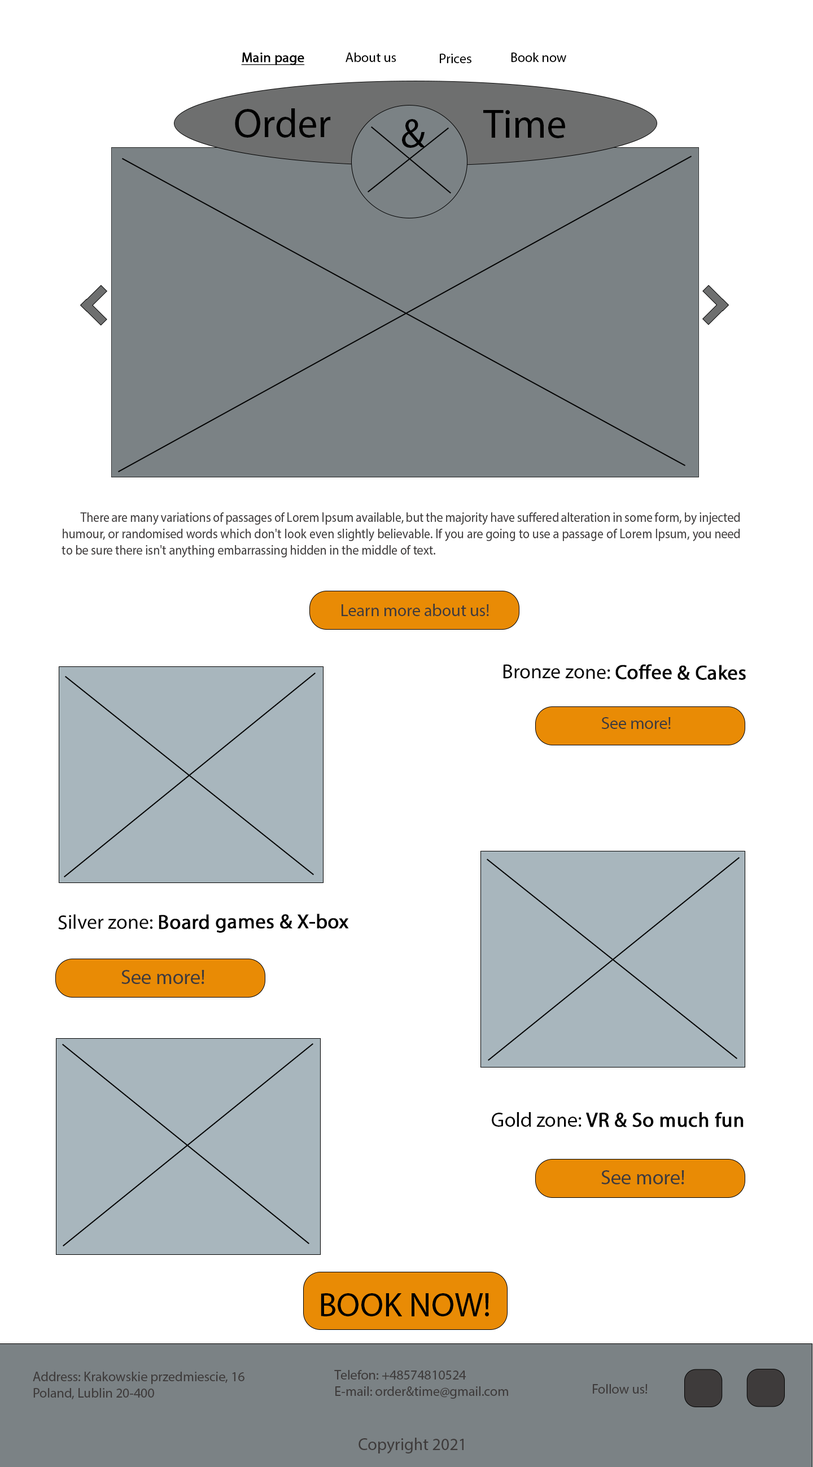
<style>
.page{position:relative;width:813px;height:1467px;background:#ffffff}
.page>*{position:absolute;margin:0}
.t1{font:13.5px "MyriadPro-Regular";color:#000000;font-weight:bold;text-decoration:underline}
.t2{font:13.5px "MyriadPro-Regular";color:#000000}
.t3{font:40.6px "MyriadPro-Regular";color:#000000}
.t4{font:13.5px "MyriadPro-Regular";color:#3e3b3b;scale:0.91 1}
.t5{font:16.9px "MyriadPro-Regular";color:#3e3b3b}
.t6{font:20.3px "MyriadPro-Regular";color:#010101;font-weight:bold}
.t7{font:20.3px "MyriadPro-Regular";color:#010101}
.t8{font:20.3px "MyriadPro-Regular";color:#000000;font-weight:bold}
.t9{font:20.3px "MyriadPro-Regular";color:#000000}
.t10{font:20.3px "MyriadPro-Regular";color:#3e3b3b}
.t11{font:20.3px "MyriadPro-Regular";color:#030303;font-weight:bold}
.t12{font:20.3px "MyriadPro-Regular";color:#030303}
.t13{font:33.9px "MyriadPro-Regular";color:#000000}
.t14{font:13.5px "MyriadPro-Regular";color:#3e3b3b}
</style>
<div class="page">
<p class="t1" style="left:241px;top:52px;width:64px;height:13px">Main page</p>
<p class="t2" style="left:345px;top:52px;width:51px;height:10px">About us</p>
<p class="t2" style="left:440px;top:54px;width:31px;height:9px">Prices</p>
<p class="t2" style="left:511px;top:52px;width:55px;height:10px">Book now</p>
<p class="t3" style="left:235px;top:108px;width:96px;height:30px">Order</p>
<p class="t3" style="left:483px;top:110px;width:82px;height:28px">Time</p>
<p class="t3" style="left:402px;top:119px;width:23px;height:29px">&amp;</p>
<p class="t4" style="left:62px;top:512px;width:678px;height:46px;text-align:justify">There are many variations of passages of Lorem Ipsum available, but the majority have suffered alteration in some form, by injected humour, or randomised words which don't look even slightly believable. If you are going to use a passage of Lorem Ipsum, you need to be sure there isn't anything embarrassing hidden in the middle of text.</p>
<p class="t5" style="left:341px;top:604px;width:148px;height:12px">Learn more about us!</p>
<p class="t6" style="left:503px;top:664px;width:243px;height:16px"><span class="t7">Bronze zone: </span>Coffee &amp; Cakes</p>
<p class="t5" style="left:601px;top:717px;width:69px;height:12px">See more!</p>
<p class="t8" style="left:58px;top:914px;width:291px;height:19px"><span class="t9">Silver zone: </span>Board games &amp; X-box</p>
<p class="t10" style="left:121px;top:970px;width:83px;height:14px">See more!</p>
<p class="t11" style="left:492px;top:1112px;width:251px;height:16px"><span class="t12">Gold zone: </span>VR &amp; So much fu<span class="t6">n</span></p>
<p class="t10" style="left:601px;top:1170px;width:83px;height:15px">See more!</p>
<p class="t13" style="left:321px;top:1293px;width:168px;height:24px">BOOK NOW!</p>
<p class="t14" style="left:33px;top:1372px;width:211px;height:28px;text-align:justify">Address: Krakowskie przedmiescie, 16<br>Poland, Lublin 20-400</p>
<p class="t14" style="left:334px;top:1370px;width:174px;height:29px;text-align:justify">Telefon: +48574810524<br>E-mail: order&amp;time@gmail.com</p>
<p class="t14" style="left:593px;top:1384px;width:54px;height:10px">Follow us!</p>
<p class="t5" style="left:358px;top:1438px;width:105px;height:16px">Copyright 2021</p>
</div>
